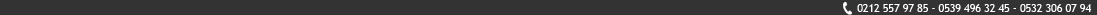
<style>
.page{position:relative;width:1097px;height:15px;background:#333333}
.page>*{position:absolute;margin:0}
.t1{font:10.7px "TrebuchetMS";color:#ffffff}
</style>
<div class="page">
<p class="t1" style="left:857px;top:4px;width:235px;height:8px">0212 557 97 85 - 0539 496 32 45 - 0532 306 07 94</p>
</div>
